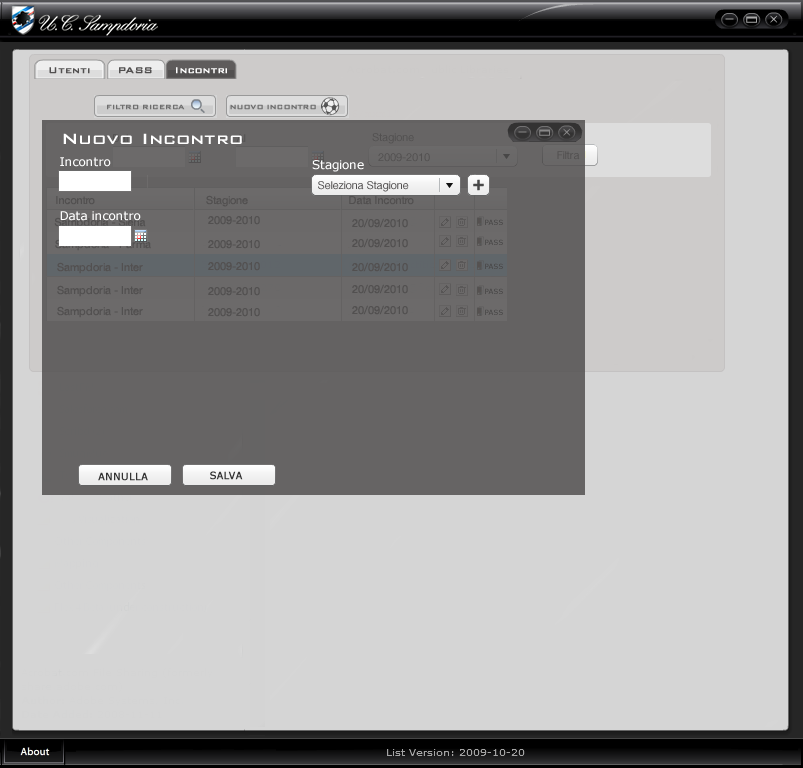
<style>
.page{position:relative;width:803px;height:768px;background:#d5d5d5}
.page>*{position:absolute;margin:0}
.t1{font:11px "BankGothicBT-Medium";color:#525050;font-weight:bold}
.t2{font:11px "BankGothicBT-Medium";color:#ffffff;font-weight:bold}
.t3{font:8px "BankGothicBT-Medium";color:#6e6e6e;font-weight:bold}
.t4{font:20px "BankGothicBT-Medium";color:#ffffff}
.t5{font:11px "HelveticaNeue-Roman";color:#525050}
.t6{font:12px "Verdana";color:#ffffff}
.t7{font:7px "Verdana"}
.t8{font:10px "Verdana";color:#333333;font-weight:bold}
</style>
<div class="page">
<p class="t1" style="left:49px;top:67px;width:41px;height:7px">Utenti</p>
<p class="t1" style="left:119px;top:67px;width:33px;height:7px">PASS</p>
<p class="t2" style="left:176px;top:67px;width:51px;height:7px">Incontri</p>
<p class="t3" style="left:107px;top:104px;width:78px;height:6px">FILTRO RICERCA</p>
<p class="t3" style="left:230px;top:104px;width:86px;height:6px">NUOVO INCONTRO</p>
<p class="t4" style="left:63px;top:133px;width:179px;height:11px">Nuovo Incontro</p>
<p class="t5" style="left:372px;top:133px;width:42px;height:11px">Stagione</p>
<p class="t6" style="left:60px;top:157px;width:51px;height:10px">Incontro</p>
<p class="t6" style="left:312px;top:160px;width:52px;height:12px">Stagione</p>
<p class="t5" style="left:378px;top:153px;width:52px;height:9px">2009-2010</p>
<p class="t5" style="left:557px;top:151px;width:23px;height:9px">Filtra</p>
<p class="t5" style="left:318px;top:181px;width:91px;height:11px">Seleziona Stagione</p>
<p class="t5" style="left:56px;top:196px;width:39px;height:9px">Incontro</p>
<p class="t5" style="left:206px;top:195px;width:42px;height:12px">Stagione</p>
<p class="t5" style="left:349px;top:196px;width:65px;height:9px">Data Incontro</p>
<p class="t5" style="left:54px;top:217px;width:92px;height:12px">Sampdoria - Siena</p>
<p class="t6" style="left:60px;top:211px;width:81px;height:10px">Data incontro</p>
<p class="t5" style="left:208px;top:216px;width:52px;height:9px">2009-2010</p>
<p class="t5" style="left:352px;top:218px;width:56px;height:10px">20/09/2010</p>
<p class="t7" style="left:485px;top:219px;width:18px;height:6px">PASS</p>
<p class="t5" style="left:208px;top:240px;width:52px;height:9px">2009-2010</p>
<p class="t5" style="left:352px;top:238px;width:56px;height:10px">20/09/2010</p>
<p class="t7" style="left:485px;top:239px;width:18px;height:6px">PASS</p>
<p class="t5" style="left:57px;top:262px;width:86px;height:12px">Sampdoria - Inter</p>
<p class="t5" style="left:208px;top:262px;width:52px;height:9px">2009-2010</p>
<p class="t5" style="left:352px;top:262px;width:56px;height:10px">20/09/2010</p>
<p class="t7" style="left:485px;top:263px;width:18px;height:6px">PASS</p>
<p class="t5" style="left:57px;top:285px;width:86px;height:12px">Sampdoria - Inter</p>
<p class="t5" style="left:208px;top:287px;width:52px;height:9px">2009-2010</p>
<p class="t5" style="left:352px;top:284px;width:56px;height:10px">20/09/2010</p>
<p class="t7" style="left:485px;top:288px;width:18px;height:6px">PASS</p>
<p class="t5" style="left:352px;top:305px;width:56px;height:10px">20/09/2010</p>
<p class="t5" style="left:57px;top:306px;width:86px;height:12px">Sampdoria - Inter</p>
<p class="t5" style="left:208px;top:308px;width:52px;height:9px">2009-2010</p>
<p class="t7" style="left:485px;top:309px;width:18px;height:6px">PASS</p>
<p class="t8" style="left:98px;top:472px;width:50px;height:9px">ANNULLA</p>
<p class="t8" style="left:210px;top:471px;width:33px;height:9px">SALVA</p>
</div>
